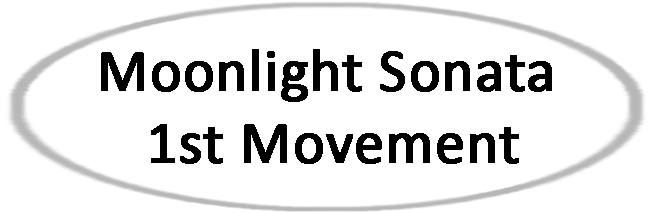
<style>
.page{position:relative;width:650px;height:213px;background:#ffffff}
.page>*{position:absolute;margin:0}
.t1{font:60px "Calibri";color:#000000;font-weight:bold}
</style>
<div class="page">
<p class="t1" style="left:101px;top:49px;width:451px;height:115px;text-align:center">Moonlight Sonata <br>1st Movement</p>
</div>
